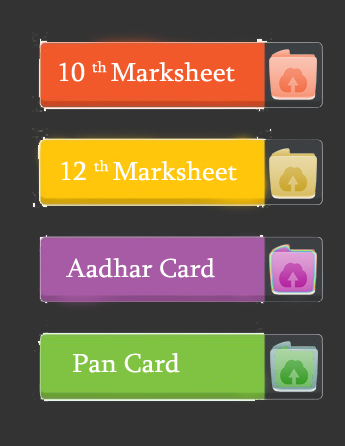
<style>
.page{position:relative;width:345px;height:446px;background:#333333}
.page>*{position:absolute;margin:0}
.t1{font:26.7px "Sylfaen";color:#ffffff;scale:1.05 1}
</style>
<div class="page">
<p class="t1" style="left:59px;top:61px;width:176px;height:21px">10 th Marksheet</p>
<p class="t1" style="left:61px;top:160px;width:176px;height:21px">12 th Marksheet</p>
<p class="t1" style="left:66px;top:258px;width:149px;height:20px">Aadhar Card</p>
<p class="t1" style="left:73px;top:353px;width:107px;height:20px">Pan Card</p>
</div>
